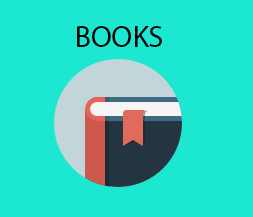
<style>
.page{position:relative;width:253px;height:217px;background:#1ce8d2}
.page>*{position:absolute;margin:0}
.t1{font:30px "MyriadPro-Regular";color:#000000}
</style>
<div class="page">
<p class="t1" style="left:77px;top:26px;width:85px;height:21px">BOOKS</p>
</div>
